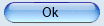
<style>
.page{position:relative;width:104px;height:26px;background:#dbe7f1}
.page>*{position:absolute;margin:0}
.t1{font:14px "Myriad-Roman";color:#000000}
</style>
<div class="page">
<p class="t1" style="left:42px;top:7px;width:17px;height:10px">Ok</p>
</div>
